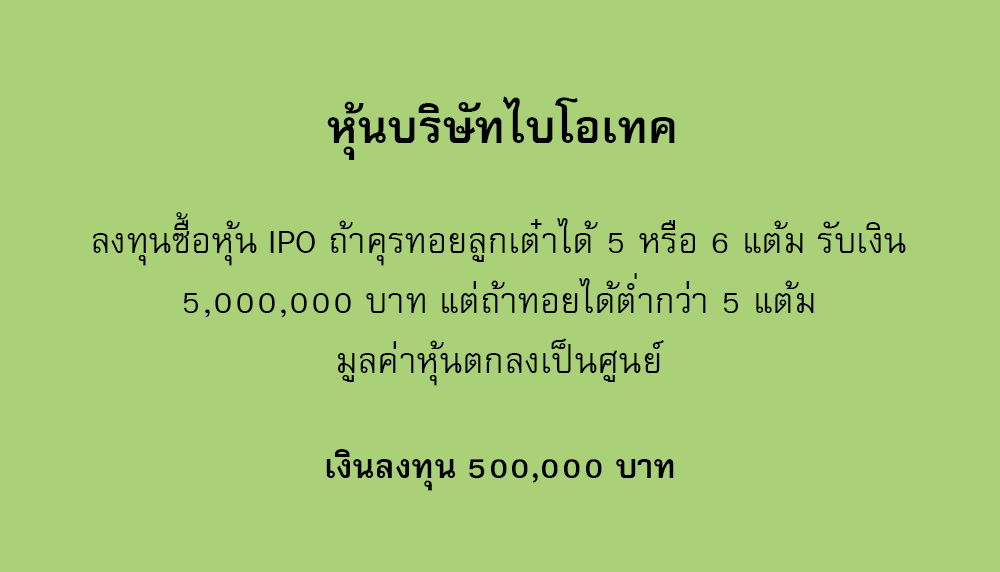
<style>
.page{position:relative;width:1000px;height:572px;background:#aad178}
.page>*{position:absolute;margin:0}
.t1{font:64px "FreesiaUPCBold";color:#000000}
.t2{font:50px/60px "FreesiaUPC";color:#000000}
.t3{font:47px "FreesiaUPCBold";color:#000000}
</style>
<div class="page">
<p class="t1" style="left:327px;top:96px;width:348px;height:64px">หุ้นบริษัทไบโอเทค</p>
<p class="t2" style="left:93px;top:212px;width:813px;height:174px;text-align:center">ลงทุนซื้อหุ้น IPO ถ้าคุรทอยลูกเต๋าได้ 5 หรือ 6 แต้ม รับเงิน<br>5,000,000 บาท แต่ถ้าทอยได้ต่ำกว่า 5 แต้ม<br>มูลค่าหุ้นตกลงเป็นศูนย์</p>
<p class="t3" style="left:326px;top:449px;width:348px;height:42px">เงินลงทุน 500,000 บาท</p>
</div>
